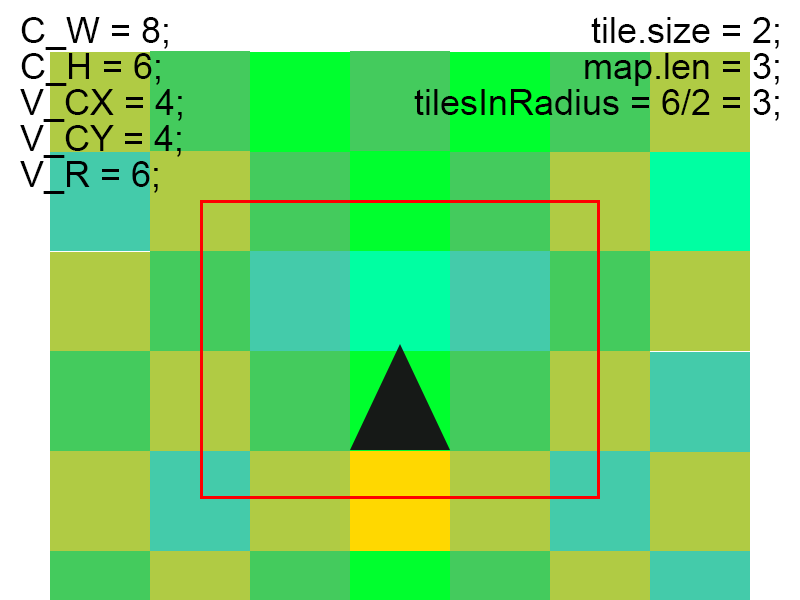
<style>
.page{position:relative;width:800px;height:600px;background:#b0cb44}
.page>*{position:absolute;margin:0}
.t1{font:36px/36px "ArialMT";color:#000000}
</style>
<div class="page">
<p class="t1" style="left:20px;top:17px;width:162px;height:177px">C_W = 8;<br>C_H = 6;<br>V_CX = 4;<br>V_CY = 4;<br>V_R = 6;</p>
<p class="t1" style="left:414px;top:17px;width:365px;height:104px;text-align:right">tile.size = 2;<br>map.len = 3;<br>tilesInRadius = 6/2 = 3;</p>
</div>
